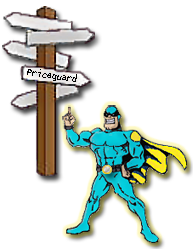
<style>
.page{position:relative;width:193px;height:249px;background:#ffffff}
.page>*{position:absolute;margin:0}
.t1{font:10.1px "LucidaConsole";color:#020202;scale:0.9 1}
</style>
<div class="page">
<p class="t1" style="left:27px;top:69px;width:50px;height:13px;rotate:8deg">Priceguard</p>
</div>
